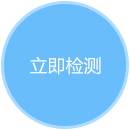
<style>
.page{position:relative;width:130px;height:130px;background:#69bdfb}
.page>*{position:absolute;margin:0}
.t1{font:18px "MicrosoftYaHei";color:#ffffff}
</style>
<div class="page">
<p class="t1" style="left:30px;top:56px;width:71px;height:19px">立即检测</p>
</div>
